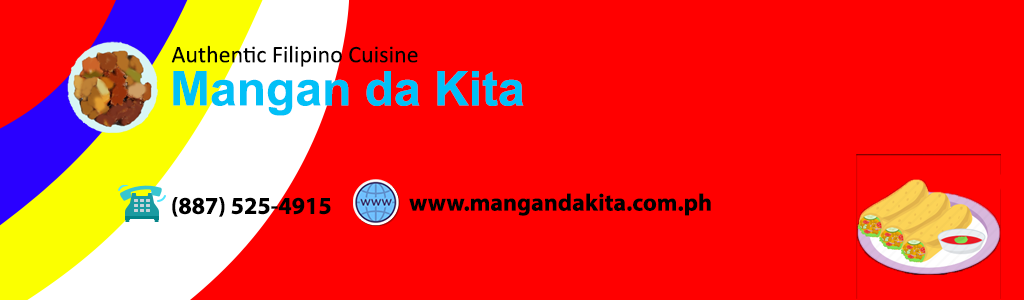
<style>
.page{position:relative;width:1024px;height:300px;background:#ff0000}
.page>*{position:absolute;margin:0}
.t1{font:24px "Calibri";color:#000000}
.t2{font:48px "Arial-BoldMT";color:#01c0f7}
.t3{font:24px "MyriadPro-Bold";color:#000000}
</style>
<div class="page">
<p class="t1" style="left:171px;top:45px;width:247px;height:22px">Authentic Filipino Cuisine</p>
<p class="t2" style="left:173px;top:71px;width:351px;height:45px">Mangan da Kita</p>
<p class="t3" style="left:172px;top:197px;width:159px;height:20px">(887) 525-4915</p>
<p class="t3" style="left:409px;top:193px;width:302px;height:23px">www.mangandakita.com.ph</p>
</div>
